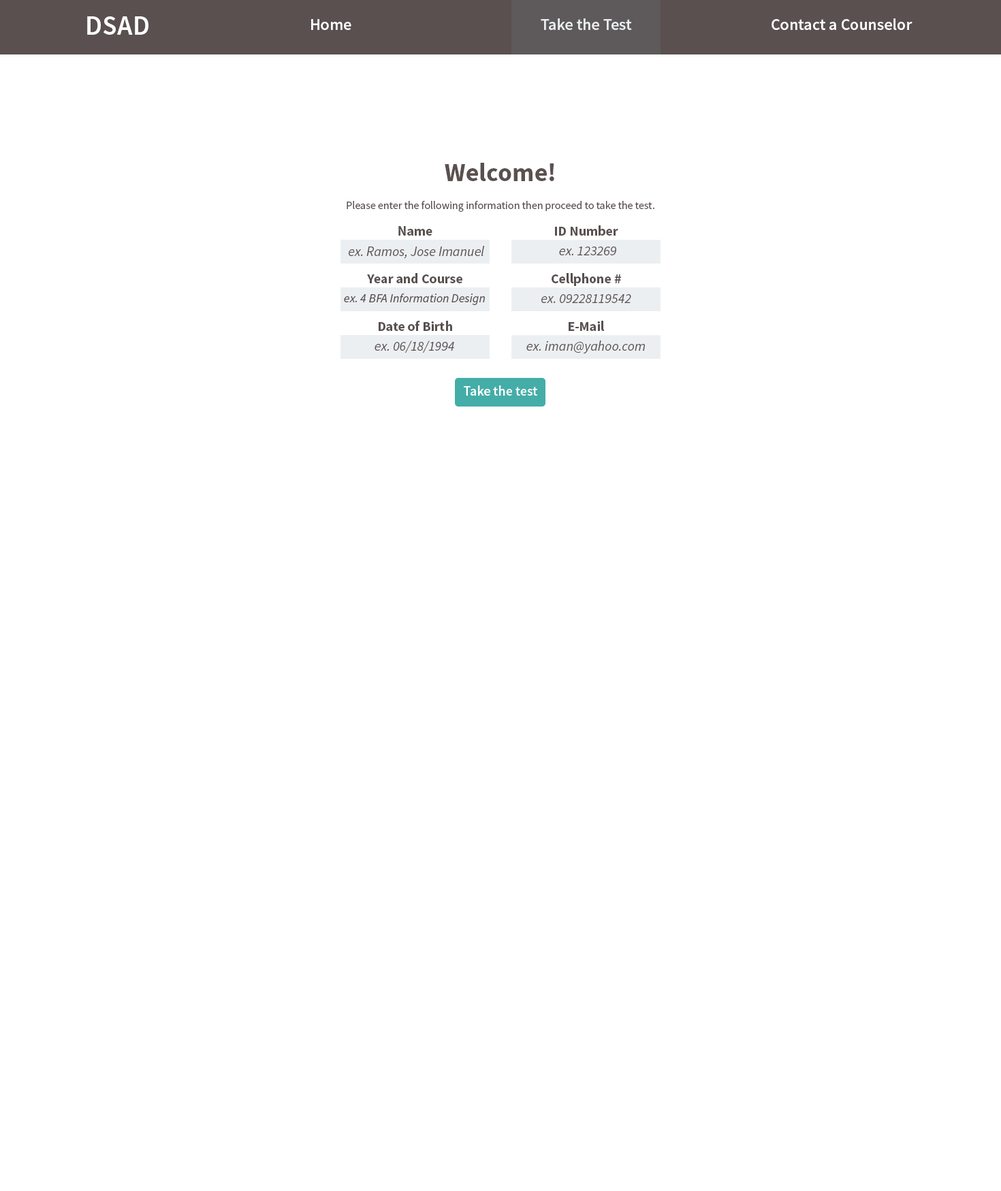
<style>
.page{position:relative;width:1001px;height:1191px;background:#ffffff}
.page>*{position:absolute;margin:0}
.t1{font:27.2px "SourceSansPro-Semibold";color:#ffffff}
.t2{font:16.3px "SourceSansPro-Semibold";color:#ffffff}
.t3{font:10.9px "SourceSansPro-Regular";color:#5a5050}
.t4{font:25.9px/32.7px "SourceSansPro-Bold";color:#5a5050}
.t5{font:13.6px "SourceSansPro-Bold";color:#5a5050}
.t6{font:13.5px "SourceSansPro-Bold";color:#5a5050}
.t7{font:13.6px "SourceSansPro-It";color:#5a5050}
.t8{font:13.5px "SourceSansPro-It";color:#5a5050}
.t9{font:12.3px "SourceSansPro-It";color:#5a5050}
.t10{font:13.6px "SourceSansPro-Semibold";color:#ffffff}
</style>
<div class="page">
<p class="t1" style="left:87px;top:16px;width:61px;height:19px">DSAD</p>
<p class="t2" style="left:311px;top:19px;width:40px;height:11px">Home</p>
<p class="t2" style="left:541px;top:18px;width:91px;height:12px">Take the Test</p>
<p class="t2" style="left:772px;top:18px;width:141px;height:12px">Contact a Counselor</p>
<p class="t3" style="left:347px;top:163px;width:307px;height:49px;text-align:center"><span class="t4">Welcome!<br></span>Please enter the following information then proceed to take the test.</p>
<p class="t5" style="left:398px;top:226px;width:34px;height:10px">Name</p>
<p class="t6" style="left:555px;top:225px;width:63px;height:11px">ID Number</p>
<p class="t7" style="left:349px;top:246px;width:135px;height:13px">ex. Ramos, Jose Imanuel</p>
<p class="t8" style="left:559px;top:247px;width:57px;height:8px">ex. 123269</p>
<p class="t5" style="left:367px;top:273px;width:95px;height:10px">Year and Course</p>
<p class="t5" style="left:552px;top:273px;width:69px;height:13px">Cellphone #</p>
<p class="t9" style="left:344px;top:294px;width:141px;height:11px">ex. 4 BFA Information Design</p>
<p class="t7" style="left:541px;top:294px;width:90px;height:9px">ex. 09228119542</p>
<p class="t5" style="left:379px;top:321px;width:73px;height:10px">Date of Birth</p>
<p class="t6" style="left:569px;top:321px;width:36px;height:10px">E-Mail</p>
<p class="t7" style="left:375px;top:341px;width:79px;height:12px">ex. 06/18/1994</p>
<p class="t7" style="left:526px;top:341px;width:119px;height:12px">ex. iman@yahoo.com</p>
<p class="t10" style="left:464px;top:385px;width:73px;height:11px">Take the test</p>
</div>
